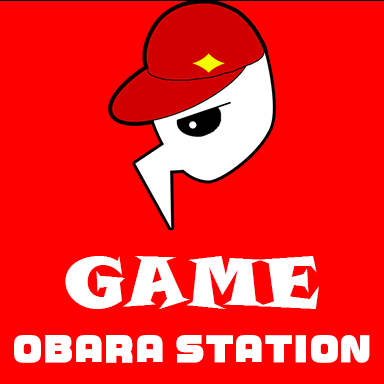
<style>
.page{position:relative;width:384px;height:384px;background:#ff0000}
.page>*{position:absolute;margin:0}
.t1{font:70.3px "SnapITC-Regular";color:#ffffff}
.t2{font:33.3px "VDL-LogoJrBlack-Black";color:#ffffff}
</style>
<div class="page">
<p class="t1" style="left:65px;top:256px;width:254px;height:53px">GAME</p>
<p class="t2" style="left:14px;top:335px;width:356px;height:28px">OBARA STATION</p>
</div>
